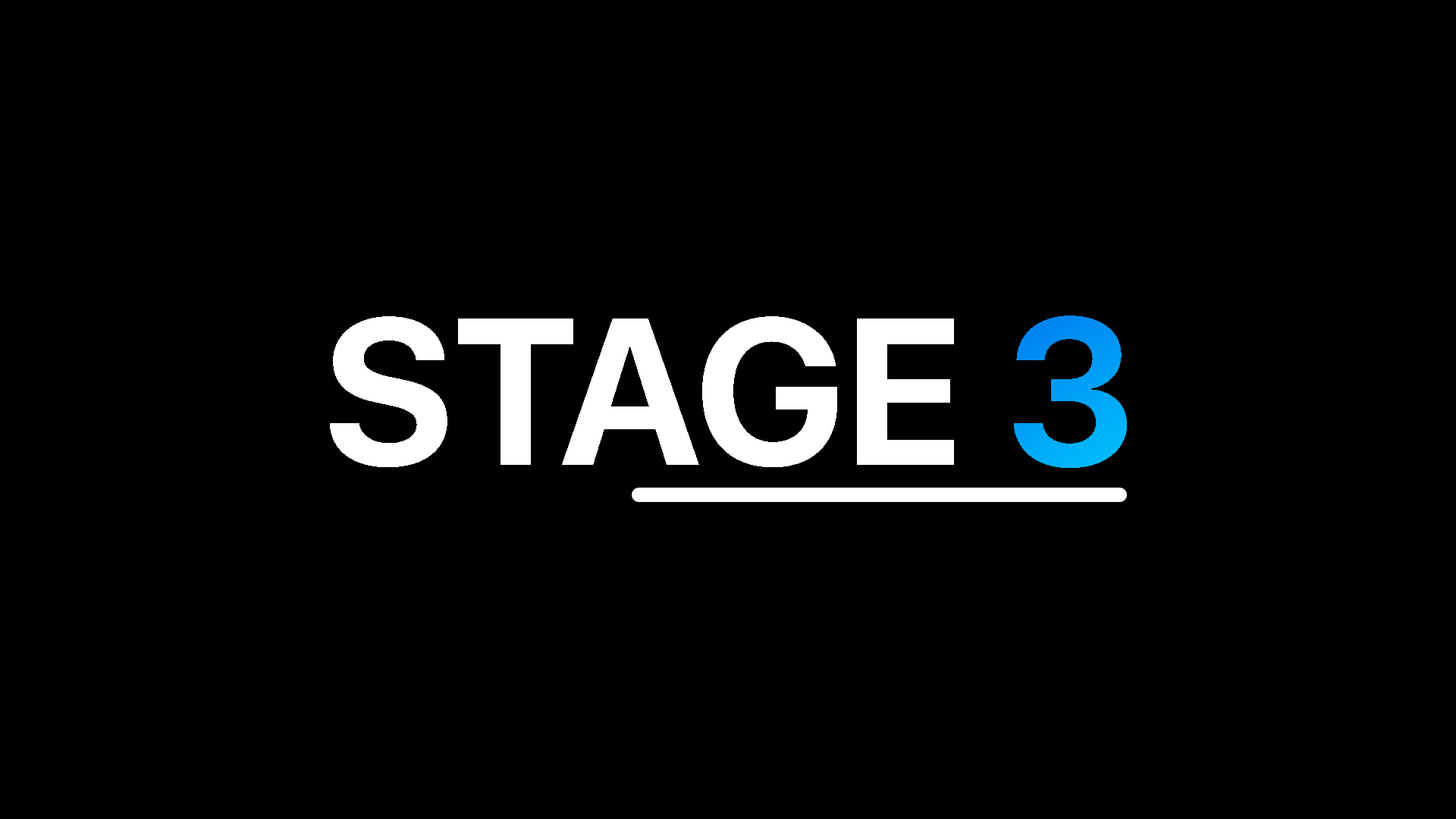
<style>
.page{position:relative;width:1456px;height:819px;background:#000000}
.page>*{position:absolute;margin:0}
.t1{font:207.2px "SFProDisplay-Bold";color:#ffffff;text-transform:uppercase}
</style>
<div class="page">
<p class="t1" style="left:330px;top:316px;width:624px;height:151px">Stage</p>
</div>
